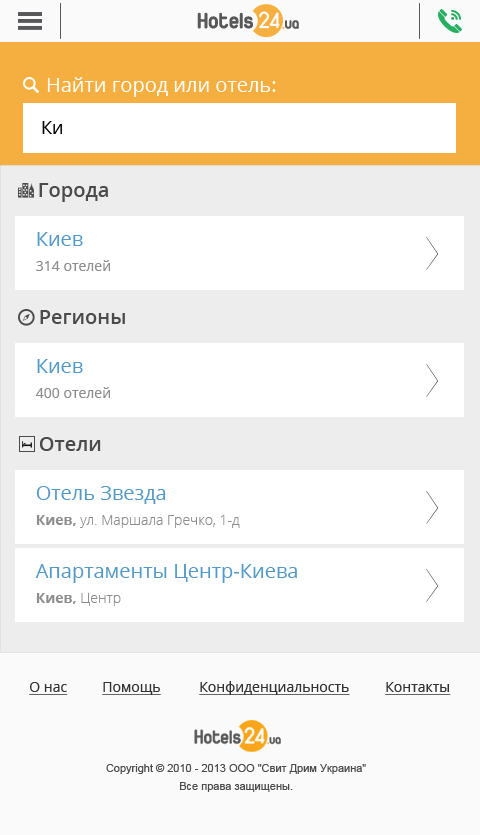
<style>
.page{position:relative;width:480px;height:835px;background:#ffffff}
.page>*{position:absolute;margin:0}
.t1{font:20px "OpenSans";color:#ffffff}
.t2{font:18px "OpenSans";color:#000000}
.t3{font:20px "OpenSans-Semibold";color:#4b4b4b}
.t4{font:20px "OpenSans";color:#5299c7}
.t5{font:14px "OpenSans";color:#8d8d8d}
.t6{font:14px "OpenSans-Light";color:#8d8d8d}
.t7{font:14px "OpenSans-Bold";color:#8d8d8d}
.t8{font:14px "OpenSans";color:#313131;text-decoration:underline}
.t9{font:11px/18px "ArialMT";color:#4b4b4b}
</style>
<div class="page">
<p class="t1" style="left:47px;top:77px;width:229px;height:20px">Найти город или отель:</p>
<p class="t2" style="left:42px;top:121px;width:20px;height:13px">Ки</p>
<p class="t3" style="left:39px;top:183px;width:69px;height:19px">Города</p>
<p class="t4" style="left:37px;top:232px;width:46px;height:14px">Киев</p>
<p class="t5" style="left:36px;top:260px;width:74px;height:11px">314 отелей</p>
<p class="t3" style="left:40px;top:310px;width:85px;height:14px">Регионы</p>
<p class="t4" style="left:37px;top:359px;width:46px;height:14px">Киев</p>
<p class="t5" style="left:35px;top:387px;width:75px;height:11px">400 отелей</p>
<p class="t3" style="left:40px;top:437px;width:61px;height:14px">Отели</p>
<p class="t4" style="left:36px;top:486px;width:130px;height:18px">Отель Звезда</p>
<p class="t6" style="left:36px;top:515px;width:204px;height:13px"><span class="t7">Киев, </span>ул. Маршала Гречко, 1-д</p>
<p class="t4" style="left:35px;top:564px;width:262px;height:19px">Апартаменты Центр-Киева</p>
<p class="t7" style="left:36px;top:593px;width:85px;height:13px">Киев, <span class="t6">Центр</span></p>
<p class="t8" style="left:29px;top:682px;width:39px;height:13px">О нас</p>
<p class="t8" style="left:102px;top:682px;width:59px;height:13px">Помощь</p>
<p class="t8" style="left:199px;top:681px;width:151px;height:14px">Конфиденциальность</p>
<p class="t8" style="left:385px;top:682px;width:66px;height:13px">Контакты</p>
<p class="t9" style="left:106px;top:764px;width:260px;height:28px;text-align:center">Copyright © 2010 - 2013 ООО "Свит Дрим Украина"<br>Все права защищены.</p>
</div>
